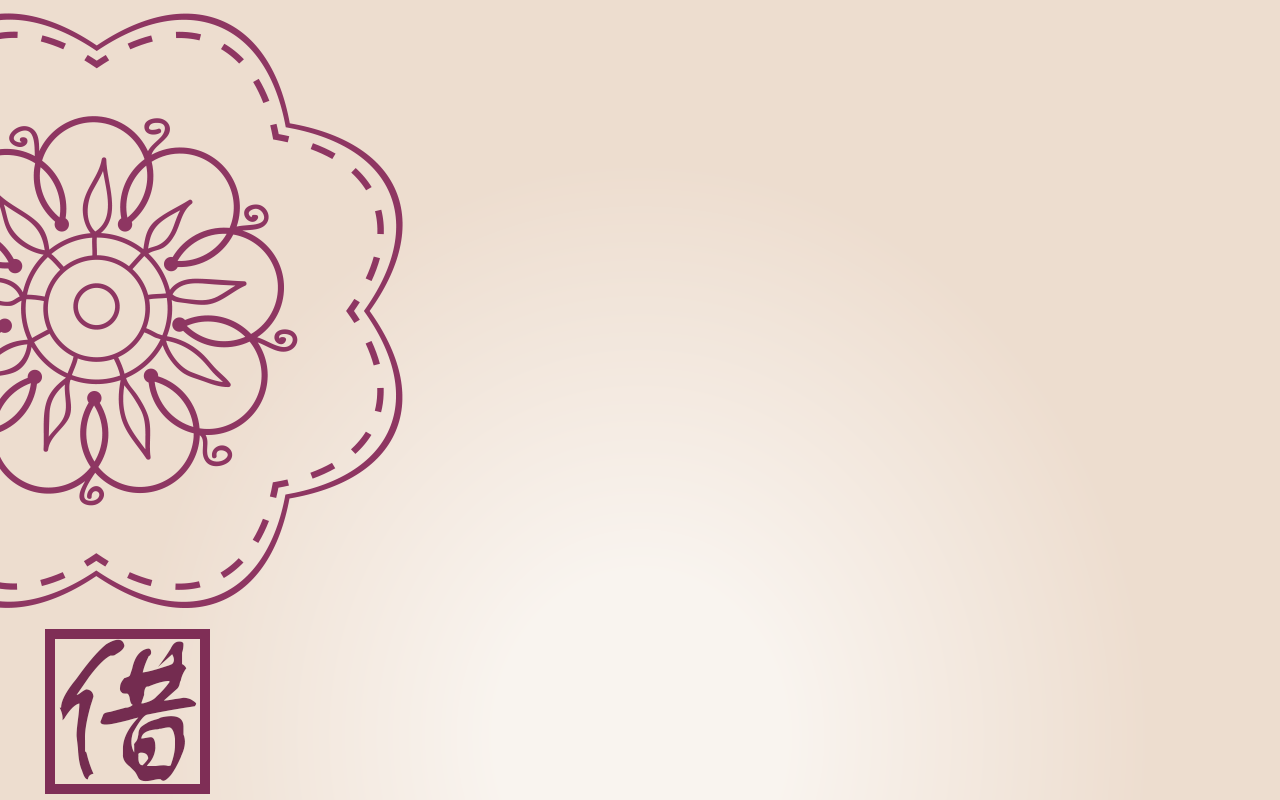
<style>
.page{position:relative;width:1280px;height:800px;background:#edddcf}
.page>*{position:absolute;margin:0}
.t1{font:180px "FZSTK--GBK1-0";color:#742c50}
</style>
<div class="page">
<p class="t1" style="left:59px;top:639px;width:138px;height:143px">借</p>
</div>
